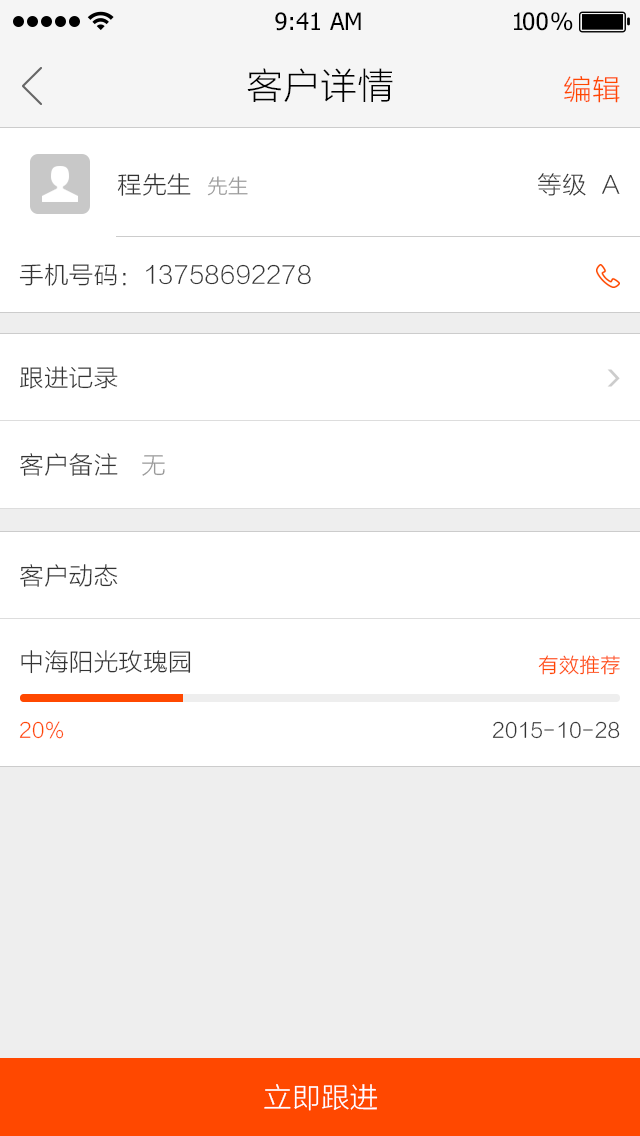
<style>
.page{position:relative;width:640px;height:1136px;background:#ffffff}
.page>*{position:absolute;margin:0}
.t1{font:24px "Tahoma";color:#000000}
.t2{font:24px "Tahoma";letter-spacing:-0.1em;color:#000000}
.t3{font:24px "Tahoma";letter-spacing:-0.25em;color:#000000}
.t4{font:36px "STHeitiSC-Light";color:#000000}
.t5{font:28px "STHeitiSC-Light";color:#ff4800}
.t6{font:24px "STHeitiSC-Light";color:#333333}
.t7{font:20px "STHeitiSC-Light";color:#999999}
.t8{font:24px "STHeitiSC-Light";color:#999999}
.t9{font:20px "STHeitiSC-Light";color:#ff4800}
.t10{font:20px "STHeitiSC-Light";color:#333333}
.t11{font:28px "STHeitiSC-Light";color:#ffffff}
</style>
<div class="page">
<p class="t1" style="left:275px;top:12px;width:86px;height:19px">9:41 AM</p>
<p class="t2" style="left:514px;top:12px;width:59px;height:19px">1<span class="t1">0</span><span class="t3">0 </span>%</p>
<p class="t4" style="left:247px;top:68px;width:146px;height:34px">客户详情</p>
<p class="t5" style="left:564px;top:76px;width:56px;height:27px">编辑</p>
<p class="t6" style="left:117px;top:173px;width:74px;height:23px">程先生</p>
<p class="t6" style="left:538px;top:173px;width:82px;height:23px">等级  A</p>
<p class="t7" style="left:207px;top:176px;width:41px;height:20px">先生</p>
<p class="t6" style="left:19px;top:263px;width:292px;height:23px">手机号码：13758692278</p>
<p class="t6" style="left:20px;top:366px;width:98px;height:23px">跟进记录</p>
<p class="t6" style="left:20px;top:453px;width:98px;height:23px">客户备注</p>
<p class="t8" style="left:142px;top:455px;width:23px;height:21px">无</p>
<p class="t6" style="left:20px;top:564px;width:98px;height:23px">客户动态</p>
<p class="t6" style="left:21px;top:650px;width:170px;height:24px">中海阳光玫瑰园</p>
<p class="t9" style="left:538px;top:655px;width:82px;height:20px">有效推荐</p>
<p class="t9" style="left:19px;top:721px;width:45px;height:18px">20%</p>
<p class="t10" style="left:492px;top:721px;width:128px;height:18px">2015-10-28</p>
<p class="t11" style="left:264px;top:1084px;width:114px;height:27px">立即跟进</p>
</div>
